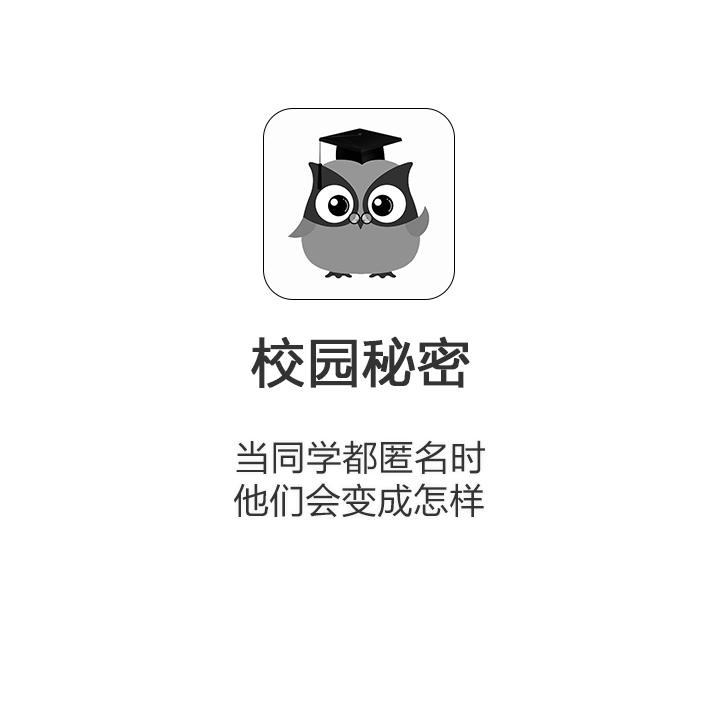
<style>
.page{position:relative;width:720px;height:720px;background:#ffffff}
.page>*{position:absolute;margin:0}
.t1{font:54px "FZLTHK--GBK1-0";color:#333333;font-weight:bold}
.t2{font:36px "FZLTHK--GBK1-0";color:#333333}
</style>
<div class="page">
<p class="t1" style="left:251px;top:336px;width:219px;height:52px">校园秘密</p>
<p class="t2" style="left:236px;top:440px;width:249px;height:34px">当同学都匿名时</p>
<p class="t2" style="left:234px;top:483px;width:250px;height:35px">他们会变成怎样</p>
</div>
